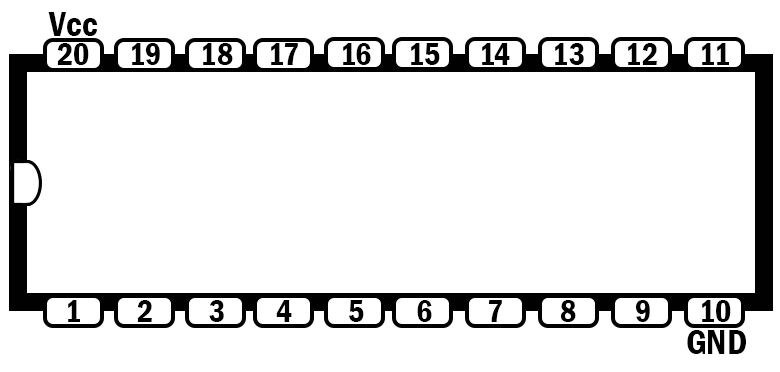
<style>
.page{position:relative;width:780px;height:372px;background:#ffffff}
.page>*{position:absolute;margin:0}
.t1{font:36px "FranklinGothic-DemiCond";color:#000000}
.t2{font:32px "FranklinGothic-DemiCond";color:#000000}
</style>
<div class="page">
<p class="t1" style="left:48px;top:12px;width:50px;height:24px">Vcc</p>
<p class="t2" style="left:57px;top:43px;width:32px;height:22px">20</p>
<p class="t2" style="left:132px;top:43px;width:28px;height:22px">19</p>
<p class="t2" style="left:203px;top:43px;width:30px;height:22px">18</p>
<p class="t2" style="left:271px;top:43px;width:27px;height:22px">17</p>
<p class="t2" style="left:343px;top:43px;width:28px;height:22px">16</p>
<p class="t2" style="left:411px;top:43px;width:29px;height:22px">15</p>
<p class="t2" style="left:482px;top:43px;width:28px;height:22px">14</p>
<p class="t2" style="left:555px;top:43px;width:29px;height:22px">13</p>
<p class="t2" style="left:628px;top:43px;width:29px;height:22px">12</p>
<p class="t2" style="left:702px;top:43px;width:27px;height:22px">11</p>
<p class="t2" style="left:68px;top:300px;width:12px;height:22px">1</p>
<p class="t2" style="left:137px;top:300px;width:15px;height:22px">2</p>
<p class="t2" style="left:209px;top:300px;width:15px;height:22px">3</p>
<p class="t2" style="left:276px;top:300px;width:16px;height:22px">4</p>
<p class="t2" style="left:349px;top:300px;width:15px;height:22px">5</p>
<p class="t2" style="left:417px;top:300px;width:15px;height:22px">6</p>
<p class="t2" style="left:488px;top:300px;width:14px;height:22px">7</p>
<p class="t2" style="left:560px;top:300px;width:16px;height:22px">8</p>
<p class="t2" style="left:635px;top:300px;width:15px;height:22px">9</p>
<p class="t2" style="left:702px;top:300px;width:29px;height:22px">10</p>
<p class="t1" style="left:687px;top:330px;width:59px;height:24px">GND</p>
</div>
